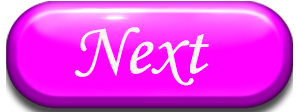
<style>
.page{position:relative;width:296px;height:112px}
.page>*{position:absolute;margin:0}
.t1{font:75px "MonotypeCorsiva";color:#fbf2f2}
</style>
<div class="page">
<p class="t1" style="left:74px;top:27px;width:135px;height:59px">Next</p>
</div>
